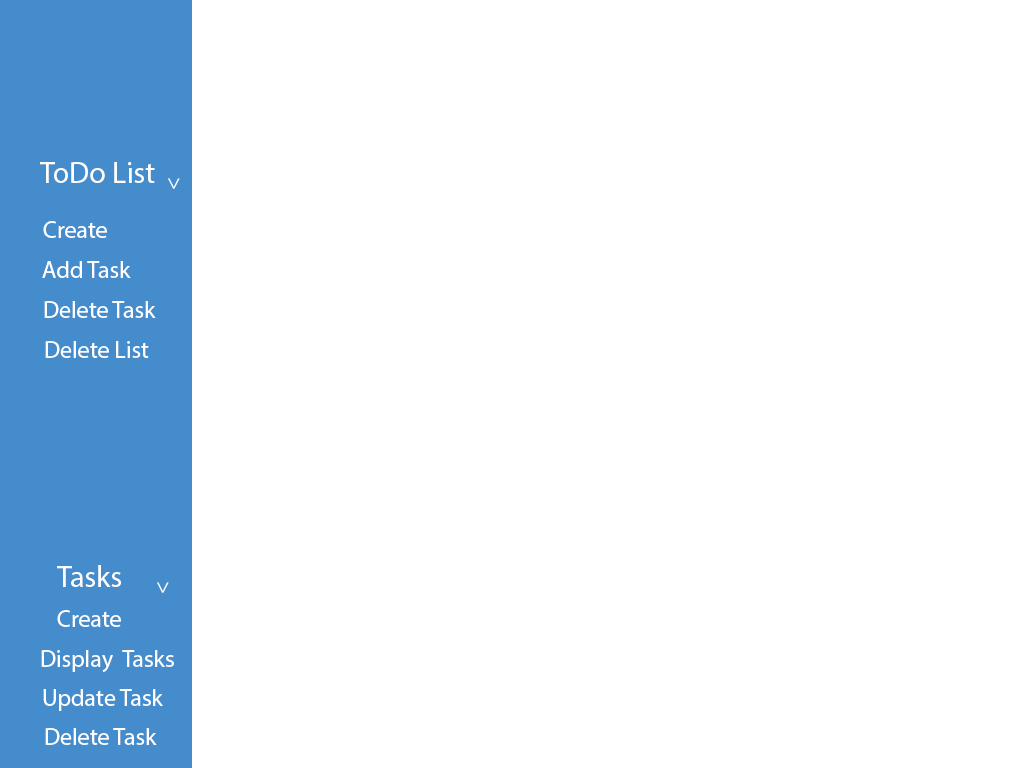
<style>
.page{position:relative;width:1024px;height:768px;background:#ffffff}
.page>*{position:absolute;margin:0}
.t1{font:30px "MyriadPro-Regular";color:#ffffff}
.t2{font:21.8px "MyriadPro-Regular";color:#ffffff}
.t3{font:24px "MyriadPro-Regular";color:#ffffff}
</style>
<div class="page">
<p class="t1" style="left:40px;top:162px;width:115px;height:21px">ToDo List</p>
<p class="t2" style="left:168px;top:178px;width:12px;height:11px;rotate:90deg">&gt;</p>
<p class="t3" style="left:43px;top:221px;width:64px;height:17px">Create</p>
<p class="t3" style="left:42px;top:261px;width:89px;height:17px">Add Task</p>
<p class="t3" style="left:44px;top:301px;width:112px;height:17px">Delete Task</p>
<p class="t3" style="left:45px;top:341px;width:104px;height:17px">Delete List</p>
<p class="t1" style="left:57px;top:565px;width:64px;height:22px">Tasks</p>
<p class="t2" style="left:157px;top:582px;width:12px;height:11px;rotate:90deg">&gt;</p>
<p class="t3" style="left:57px;top:610px;width:64px;height:17px">Create</p>
<p class="t3" style="left:41px;top:650px;width:133px;height:22px">Display  Tasks</p>
<p class="t3" style="left:43px;top:689px;width:120px;height:22px">Update Task</p>
<p class="t3" style="left:45px;top:728px;width:112px;height:17px">Delete Task</p>
</div>
